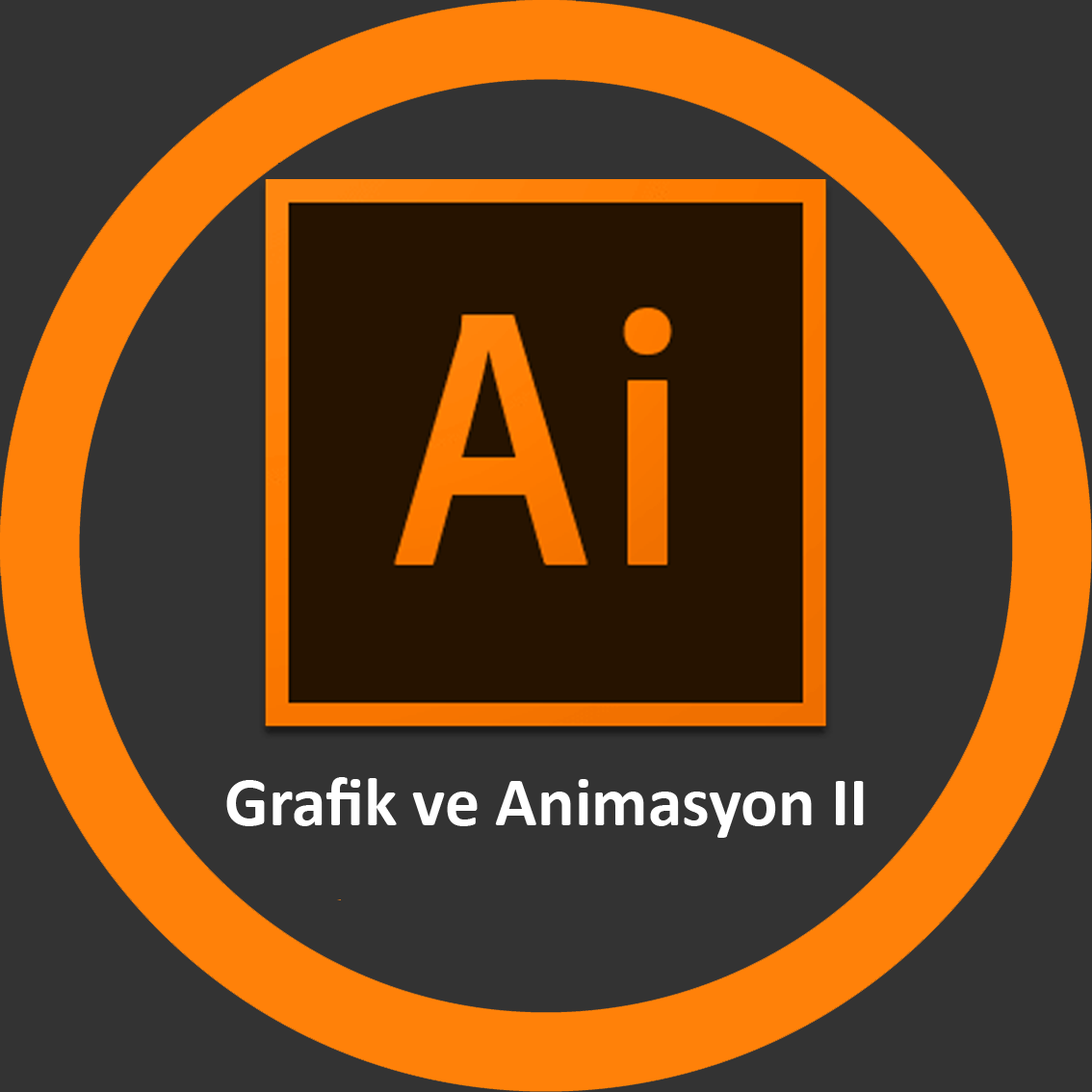
<style>
.page{position:relative;width:1092px;height:1092px;background:#333333}
.page>*{position:absolute;margin:0}
.t1{font:69.3px "Calibri-Bold";color:#ffffff}
</style>
<div class="page">
<p class="t1" style="left:226px;top:777px;width:638px;height:61px">Grafik ve Animasyon II</p>
</div>
